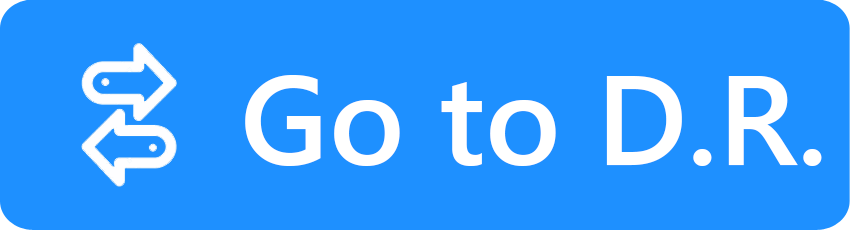
<style>
.page{position:relative;width:850px;height:230px;background:#1e90ff}
.page>*{position:absolute;margin:0}
.t1{font:127px "SegoeUI-Semibold";color:#ffffff}
</style>
<div class="page">
<p class="t1" style="left:245px;top:75px;width:577px;height:91px">Go to D.R.</p>
</div>
